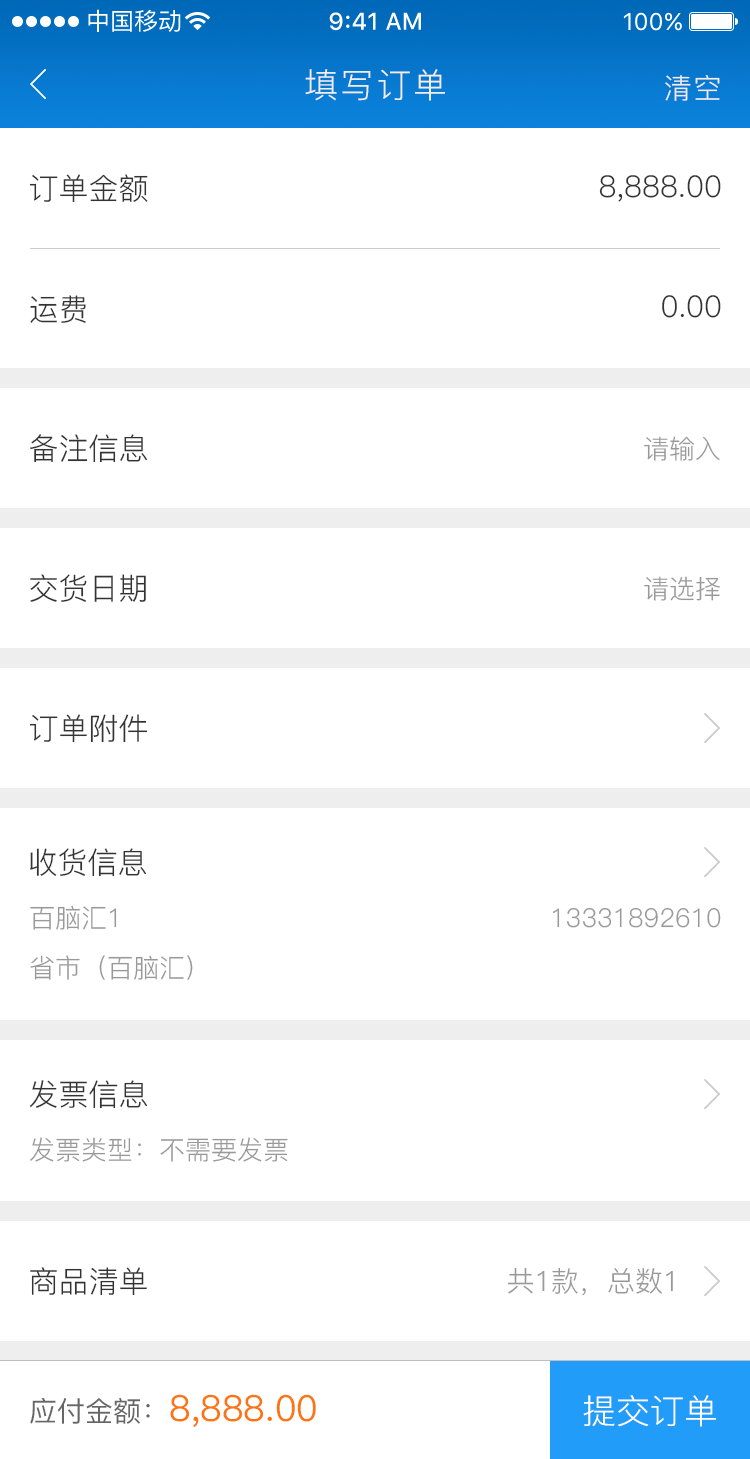
<style>
.page{position:relative;width:750px;height:1459px;background:#ffffff}
.page>*{position:absolute;margin:0}
.t1{font:34px "PingFang-SC-Regular";letter-spacing:0.06em;color:#eeeeee}
.t2{font:28px "PingFang-SC-Regular";letter-spacing:0.06em;color:#eeeeee}
.t3{font:30px "PingFang-SC-Regular";color:#333333}
.t4{font:26px "PingFang-SC-Regular";color:#999999}
.t5{font:28px "PingFang-SC-Regular";color:#999999}
.t6{font:36px "PingFang-SC-Medium";color:#fb7512}
.t7{font:28px "PingFang-SC-Medium";color:#666666}
.t8{font:34px "PingFang-SC-Regular";color:#ffffff}
</style>
<div class="page">
<p class="t1" style="left:305px;top:69px;width:140px;height:32px">填写订单</p>
<p class="t2" style="left:665px;top:75px;width:55px;height:26px">清空</p>
<p class="t3" style="left:29px;top:174px;width:119px;height:29px">订单金额</p>
<p class="t3" style="left:599px;top:175px;width:122px;height:27px">8,888.00</p>
<p class="t3" style="left:30px;top:295px;width:56px;height:28px">运费</p>
<p class="t3" style="left:662px;top:295px;width:59px;height:23px">0.00</p>
<p class="t3" style="left:30px;top:434px;width:118px;height:29px">备注信息</p>
<p class="t4" style="left:644px;top:436px;width:76px;height:25px">请输入</p>
<p class="t3" style="left:30px;top:574px;width:116px;height:28px">交货日期</p>
<p class="t4" style="left:644px;top:576px;width:76px;height:25px">请选择</p>
<p class="t3" style="left:29px;top:714px;width:119px;height:29px">订单附件</p>
<p class="t3" style="left:30px;top:848px;width:117px;height:29px">收货信息</p>
<p class="t4" style="left:30px;top:905px;width:87px;height:25px">百脑汇1</p>
<p class="t4" style="left:552px;top:907px;width:169px;height:21px">13331892610</p>
<p class="t4" style="left:30px;top:955px;width:163px;height:25px">省市（百脑汇）</p>
<p class="t3" style="left:29px;top:1080px;width:119px;height:29px">发票信息</p>
<p class="t4" style="left:30px;top:1137px;width:258px;height:25px">发票类型：不需要发票</p>
<p class="t3" style="left:30px;top:1267px;width:117px;height:29px">商品清单</p>
<p class="t5" style="left:507px;top:1267px;width:166px;height:29px">共1款，总数1</p>
<p class="t6" style="left:30px;top:1394px;width:286px;height:33px"><span class="t7">应付金额：</span>8,888.00</p>
<p class="t8" style="left:583px;top:1395px;width:133px;height:32px">提交订单</p>
</div>
